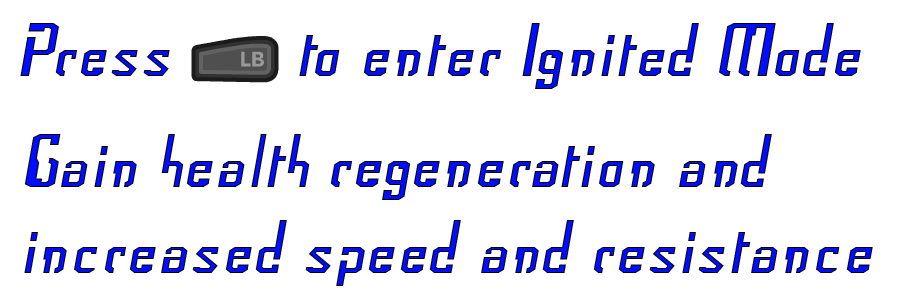
<style>
.page{position:relative;width:900px;height:300px;background:#ffffff}
.page>*{position:absolute;margin:0}
.t1{font:72px "Frak-Regular";color:#000dff}
.t2{font:72px "Frak-Regular"}
</style>
<div class="page">
<p class="t1" style="left:20px;top:23px;width:150px;height:53px">Press</p>
<p class="t1" style="left:299px;top:23px;width:562px;height:66px">to enter Ignited Mode</p>
<p class="t2" style="left:24px;top:134px;width:849px;height:152px">Gain health regeneration and<br>increased speed and resistance</p>
</div>
